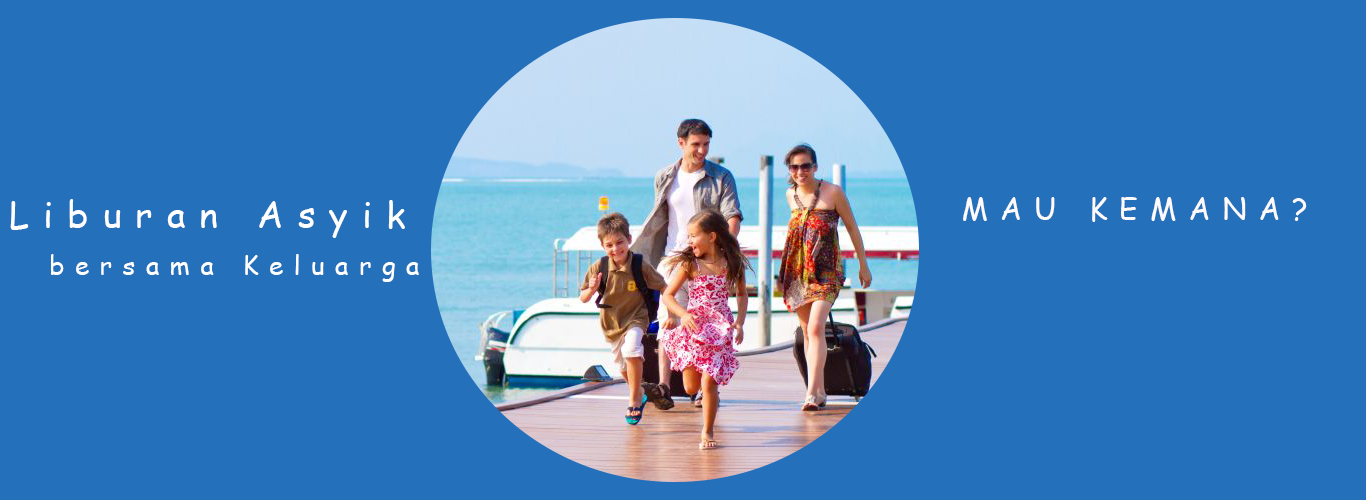
<style>
.page{position:relative;width:1366px;height:500px;background:#2470ba}
.page>*{position:absolute;margin:0}
.t1{font:30px "ComicSansMS";letter-spacing:0.4em;color:#fcfafa}
.t2{font:35.5px "ComicSansMS";letter-spacing:0.4em;color:#ffffff}
.t3{font:26.2px "ComicSansMS";letter-spacing:0.4em;color:#ffffff}
</style>
<div class="page">
<p class="t1" style="left:963px;top:197px;width:344px;height:25px">MAU KEMANA?</p>
<p class="t2" style="left:10px;top:199px;width:395px;height:39px">Liburan Asyik</p>
<p class="t3" style="left:51px;top:254px;width:368px;height:28px">bersama Keluarga</p>
</div>
